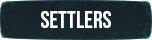
<style>
.page{position:relative;width:152px;height:40px}
.page>*{position:absolute;margin:0}
.t1{font:24px "BebasNeue-Regular";color:#ffffff}
</style>
<div class="page">
<p class="t1" style="left:41px;top:11px;width:70px;height:17px">Settlers</p>
</div>
